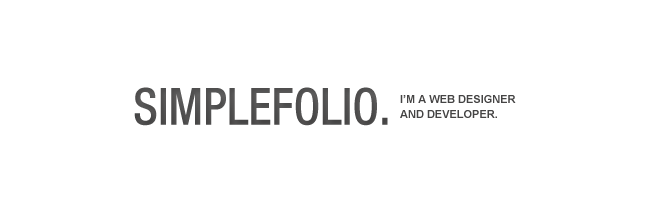
<style>
.page{position:relative;width:650px;height:212px;background:#ffffff}
.page>*{position:absolute;margin:0}
.t1{font:50.8px "HelveticaNeueLT-MediumCond";color:#454444;scale:0.94 1}
.t2{font:11px/15px "Arial-BoldMT";color:#454444}
</style>
<div class="page">
<p class="t1" style="left:134px;top:87px;width:254px;height:39px;opacity:0.9">SIMPLEFOLIO.</p>
<p class="t2" style="left:400px;top:95px;width:116px;height:23px">I’M A WEB DESIGNER<br>AND DEVELOPER.</p>
</div>
